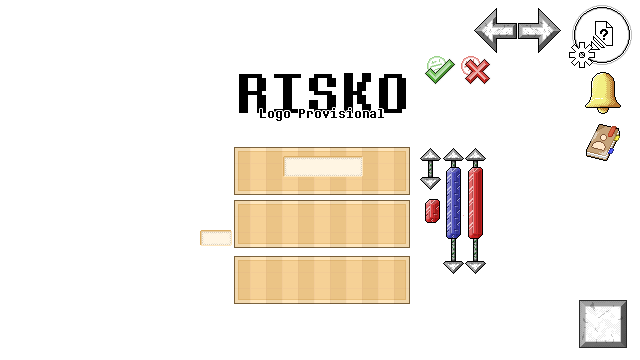
<style>
.page{position:relative;width:640px;height:360px;background:#ffffff}
.page>*{position:absolute;margin:0}
.t1{font:57.9px "DeterminationMono";color:#000000}
.t2{font:13px "DeterminationMono";color:#000000}
</style>
<div class="page">
<p class="t1" style="left:239px;top:73px;width:167px;height:40px">RISKO</p>
<p class="t2" style="left:260px;top:108px;width:124px;height:13px">Logo Provisional</p>
</div>
